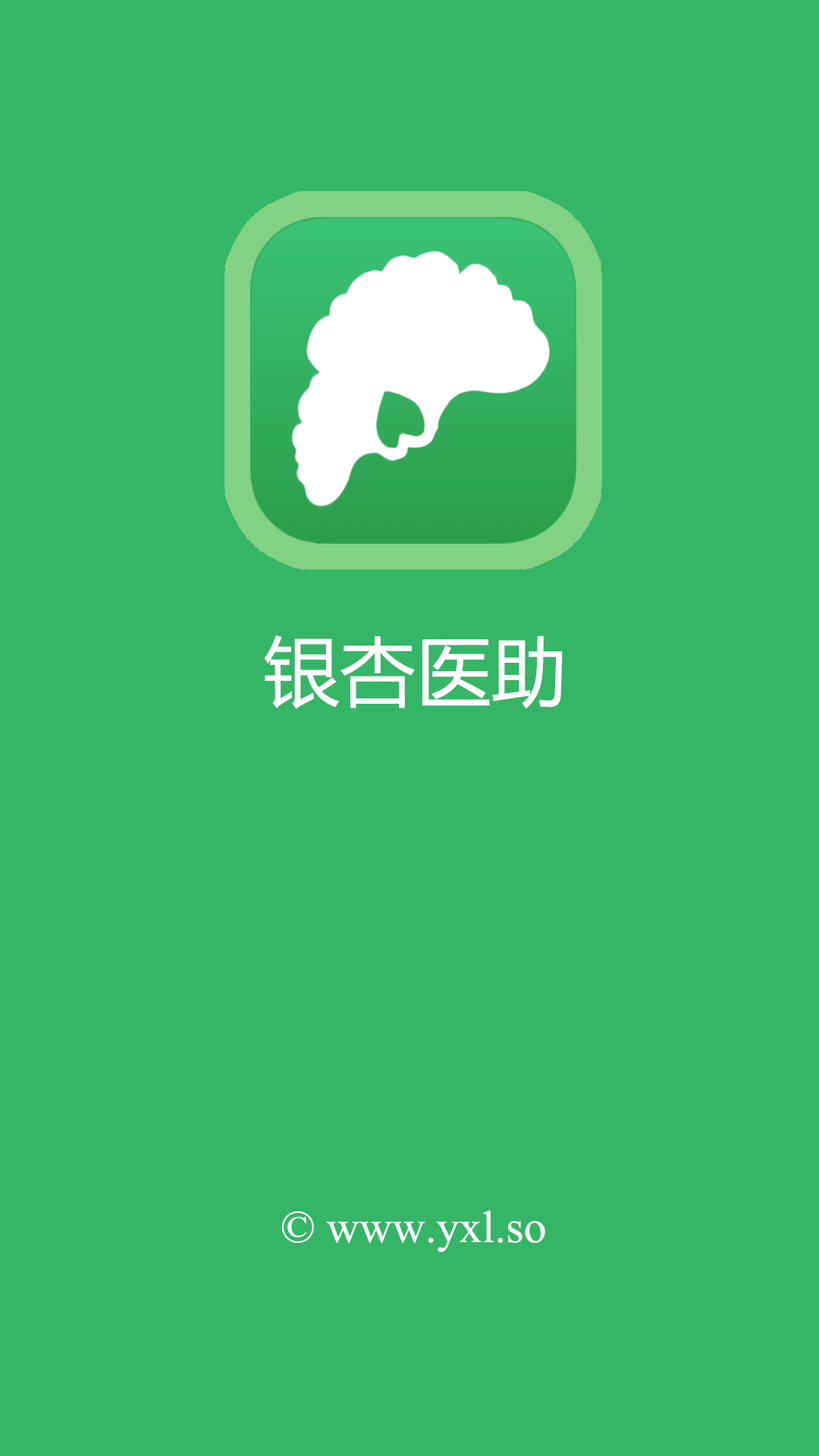
<style>
.page{position:relative;width:819px;height:1456px;background:#35b667}
.page>*{position:absolute;margin:0}
.t1{font:75.8px "MicrosoftYaHei";color:#fefefe}
.t2{font:45.5px "IskoolaPota";color:#fefefe}
</style>
<div class="page">
<p class="t1" style="left:264px;top:635px;width:299px;height:74px">银杏医助</p>
<p class="t2" style="left:282px;top:1210px;width:263px;height:42px">© www.yxl.so</p>
</div>
